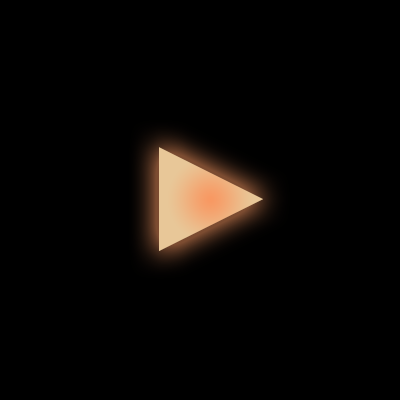
<style>
.page{position:relative;width:400px;height:400px;background:#000000}
.page>*{position:absolute;margin:0}
.t1{font:150.3px "TimesNewRomanPSMT";color:#e8c798}
</style>
<div class="page">
<p class="t1" style="left:159px;top:147px;width:104px;height:104px;rotate:90deg">▲</p>
</div>
